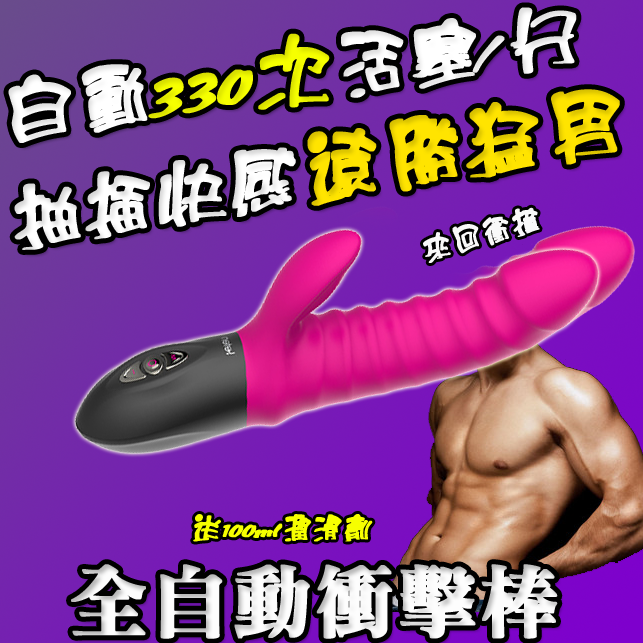
<style>
.page{position:relative;width:643px;height:643px}
.page>*{position:absolute;margin:0}
.t1{font:80px "HanWangCC15";color:#f6ff00;font-weight:bold}
.t2{font:72px "HanWangCC15";color:#ffffff;font-weight:bold}
.t3{font:80px "HanWangCC15";color:#ffe400;font-weight:bold}
.t4{font:30px "HanWangCC15";color:#f9f9f9;font-weight:bold}
.t5{font:30px "HanWangCC15";color:#f6ff00;font-weight:bold}
.t6{font:80px "HanWangWCL02";color:#fdfdfd;font-weight:bold}
</style>
<div class="page">
<p class="t1" style="left:8px;top:7px;width:569px;height:136px;rotate:-8deg"><span class="t2">自動</span>330次<span class="t2">活塞/分</span></p>
<p class="t2" style="left:14px;top:89px;width:606px;height:161px;rotate:-9deg">抽插快感<span class="t3">遠勝猛男</span></p>
<p class="t4" style="left:423px;top:207px;width:117px;height:56px;rotate:-16deg">來回衝撞</p>
<p class="t5" style="left:193px;top:514px;width:180px;height:28px">送100ml潤滑劑</p>
<p class="t6" style="left:71px;top:564px;width:487px;height:75px">全自動衝擊棒</p>
</div>
